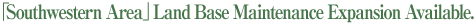
<style>
.page{position:relative;width:475px;height:24px;background:#ffffff}
.page>*{position:absolute;margin:0}
.t1{font:20px "RyuminPro-ExBold";letter-spacing:-0.08em;color:#46754a;scale:0.87 1}
</style>
<div class="page">
<p class="t1" style="left:3px;top:2px;width:471px;height:21px">「Southwestern Area」Land Base Maintenance Expansion Available.</p>
</div>
